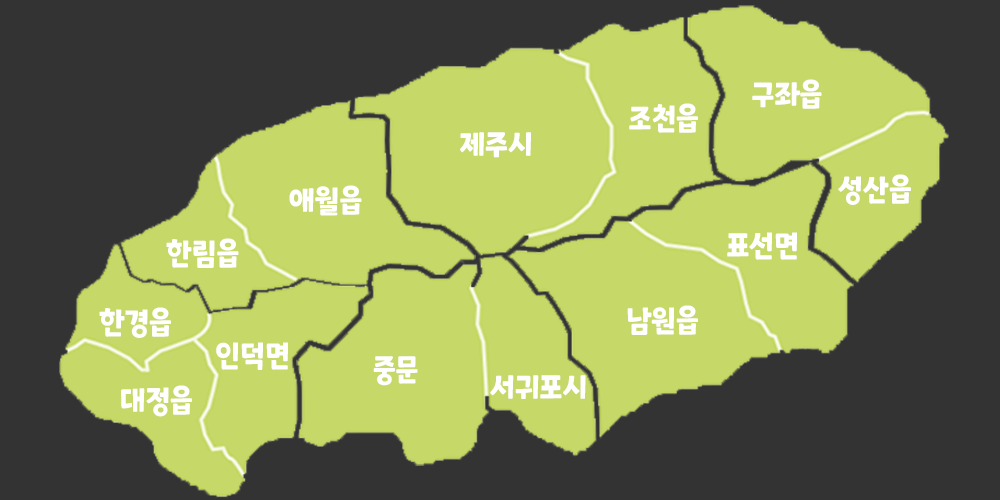
<style>
.page{position:relative;width:1000px;height:500px;background:#333333}
.page>*{position:absolute;margin:0}
.t1{font:30.5px "ONEMobilePOPRegular";color:#ffffff;scale:0.93 1}
</style>
<div class="page">
<p class="t1" style="left:752px;top:79px;width:70px;height:30px">구좌읍</p>
<p class="t1" style="left:629px;top:103px;width:69px;height:30px">조천읍</p>
<p class="t1" style="left:460px;top:132px;width:71px;height:26px">제주시</p>
<p class="t1" style="left:838px;top:174px;width:73px;height:31px">성산읍</p>
<p class="t1" style="left:289px;top:185px;width:73px;height:31px">애월읍</p>
<p class="t1" style="left:727px;top:232px;width:70px;height:28px">표선면</p>
<p class="t1" style="left:166px;top:238px;width:73px;height:30px">한림읍</p>
<p class="t1" style="left:627px;top:305px;width:71px;height:30px">남원읍</p>
<p class="t1" style="left:99px;top:307px;width:72px;height:31px">한경읍</p>
<p class="t1" style="left:216px;top:342px;width:72px;height:28px">인덕면</p>
<p class="t1" style="left:373px;top:356px;width:45px;height:30px">중문</p>
<p class="t1" style="left:490px;top:375px;width:96px;height:24px">서귀포시</p>
<p class="t1" style="left:121px;top:385px;width:71px;height:32px">대정읍</p>
</div>
